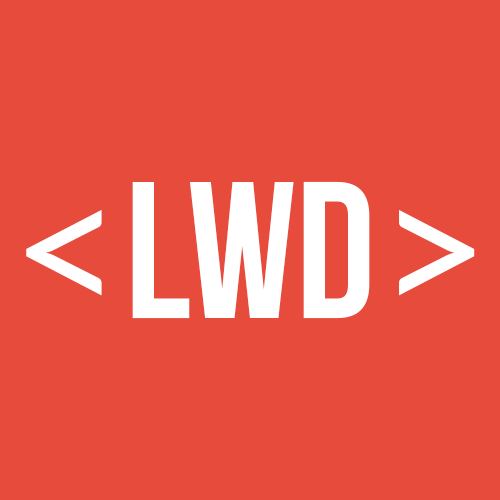
<style>
.page{position:relative;width:500px;height:500px;background:#e74b3c}
.page>*{position:absolute;margin:0}
.t1{font:194.2px "BebasNeue";color:#ffffff}
.t2{font:194.2px "Lato-Regular";color:#ffffff}
</style>
<div class="page">
<p class="t1" style="left:26px;top:181px;width:449px;height:138px"><span class="t2">&lt;</span>LWD<span class="t2">&gt;</span></p>
</div>
